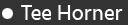
<style>
.page{position:relative;width:128px;height:25px;background:#333333}
.page>*{position:absolute;margin:0}
.t1{font:22px "Seravek";color:#ffffff}
</style>
<div class="page">
<p class="t1" style="left:21px;top:5px;width:102px;height:15px">Tee Horner</p>
</div>
